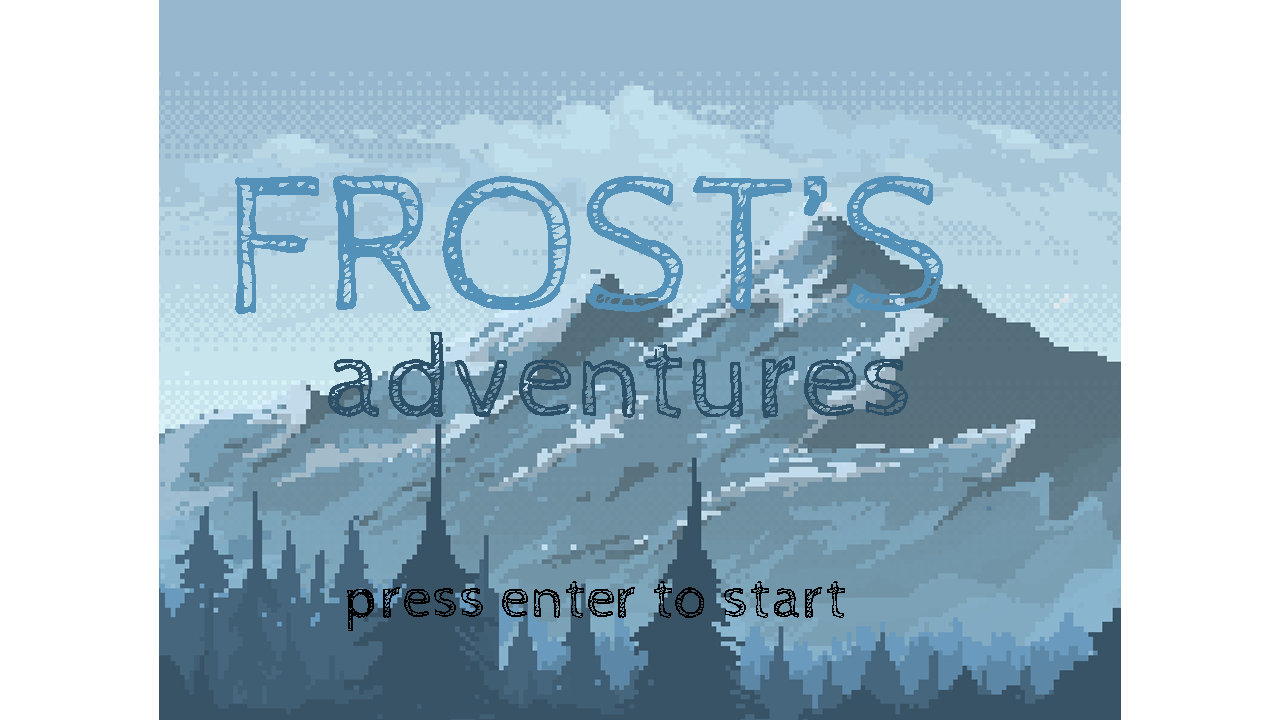
<style>
.page{position:relative;width:1280px;height:720px;background:#ffffff}
.page>*{position:absolute;margin:0}
.t1{font:200px "CabinSketch-Regular";color:#5391b8}
.t2{font:120px "CabinSketch-Regular";color:#2c5067}
.t3{font:60px "CabinSketch-Regular";color:#000000}
</style>
<div class="page">
<p class="t1" style="left:235px;top:175px;width:708px;height:139px">FROST’S</p>
<p class="t2" style="left:328px;top:332px;width:580px;height:87px">adventures</p>
<p class="t3" style="left:347px;top:581px;width:498px;height:50px">press enter to start</p>
</div>
